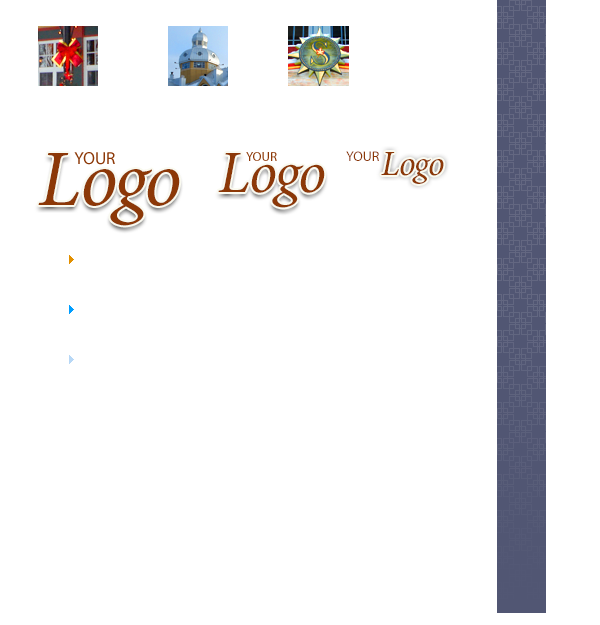
<style>
.page{position:relative;width:600px;height:625px;background:#ffffff}
.page>*{position:absolute;margin:0}
.t1{font:80px "MinionPro-It";letter-spacing:-0.04em;color:#8c3807}
.t2{font:80px "MinionPro-It";letter-spacing:-0.02em;color:#8c3807;text-transform:uppercase}
.t3{font:80px "MinionPro-It";color:#8c3807}
.t4{font:17.3px "MyriadPro-Regular";color:#8c3807;text-transform:uppercase}
.t5{font:60px "MinionPro-It";letter-spacing:-0.04em;color:#8c3807}
.t6{font:60px "MinionPro-It";letter-spacing:-0.02em;color:#8c3807;text-transform:uppercase}
.t7{font:60px "MinionPro-It";color:#8c3807}
.t8{font:13px "MyriadPro-Regular";color:#8c3807;text-transform:uppercase}
.t9{font:14px "MyriadPro-Regular";color:#8c3807;text-transform:uppercase}
.t10{font:35.4px "MinionPro-It";letter-spacing:-0.04em;color:#8c3807}
.t11{font:35.4px "MinionPro-It";letter-spacing:-0.02em;color:#8c3807;text-transform:uppercase}
.t12{font:35.4px "MinionPro-It";color:#8c3807}
</style>
<div class="page">
<p class="t1" style="left:38px;top:153px;width:142px;height:73px"><span class="t2">L</span>og<span class="t3">o</span></p>
<p class="t4" style="left:74px;top:152px;width:41px;height:13px">YOUR</p>
<p class="t5" style="left:218px;top:153px;width:107px;height:55px"><span class="t6">L</span>og<span class="t7">o</span></p>
<p class="t8" style="left:246px;top:152px;width:31px;height:9px">YOUR</p>
<p class="t9" style="left:346px;top:151px;width:33px;height:10px">YOUR</p>
<p class="t10" style="left:381px;top:152px;width:63px;height:32px"><span class="t11">L</span>og<span class="t12">o</span></p>
</div>
